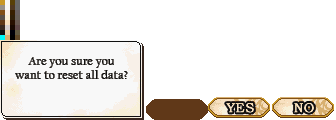
<style>
.page{position:relative;width:336px;height:120px;background:#ffffff}
.page>*{position:absolute;margin:0}
.t1{font:12px/14px "CalifornianFB-Reg";letter-spacing:0.025em;color:#101010}
</style>
<div class="page">
<p class="t1" style="left:15px;top:57px;width:113px;height:22px;text-align:center">Are you sure you<br>want to reset all data?</p>
</div>
